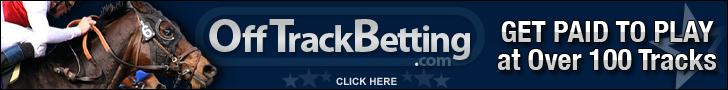
<style>
.page{position:relative;width:728px;height:90px}
.page>*{position:absolute;margin:0}
.t1{font:38.1px "MyriadPro-Bold";letter-spacing:-0.05em;color:#e0e2e2}
.t2{font:47.6px "MyriadPro-Bold";color:#e0e2e2}
.t3{font:38.1px "MyriadPro-Bold";letter-spacing:0.05em;color:#e0e2e2}
.t4{font:47.6px "MyriadPro-Bold";letter-spacing:-0.15em;color:#e0e2e2}
.t5{font:47.6px "MyriadPro-Bold";letter-spacing:-0.05em;color:#e0e2e2}
.t6{font:30px "HelveticaNeue-CondensedBold"}
.t7{font:18.8px "MyriadPro-Bold";letter-spacing:-0.05em;color:#3e647e}
.t8{font:18.8px "MyriadPro-Bold";letter-spacing:-0.05em;color:#ffffff}
.t9{font:10px "Arial-BoldMT";color:#e0e2e2}
</style>
<div class="page">
<p class="t1" style="left:208px;top:12px;width:262px;height:52px"><span class="t2">O</span><span class="t3">ff</span><span class="t4">T</span>rack<span class="t5">B</span>etting</p>
<p class="t6" style="left:500px;top:16px;width:214px;height:33px">GET PAID TO PLAY</p>
<p class="t7" style="left:414px;top:50px;width:37px;height:21px"><span class="t8">.</span>com</p>
<p class="t6" style="left:497px;top:44px;width:220px;height:33px">at Over 100 Tracks</p>
<p class="t9" style="left:336px;top:76px;width:61px;height:13px">CLICK HERE</p>
</div>
